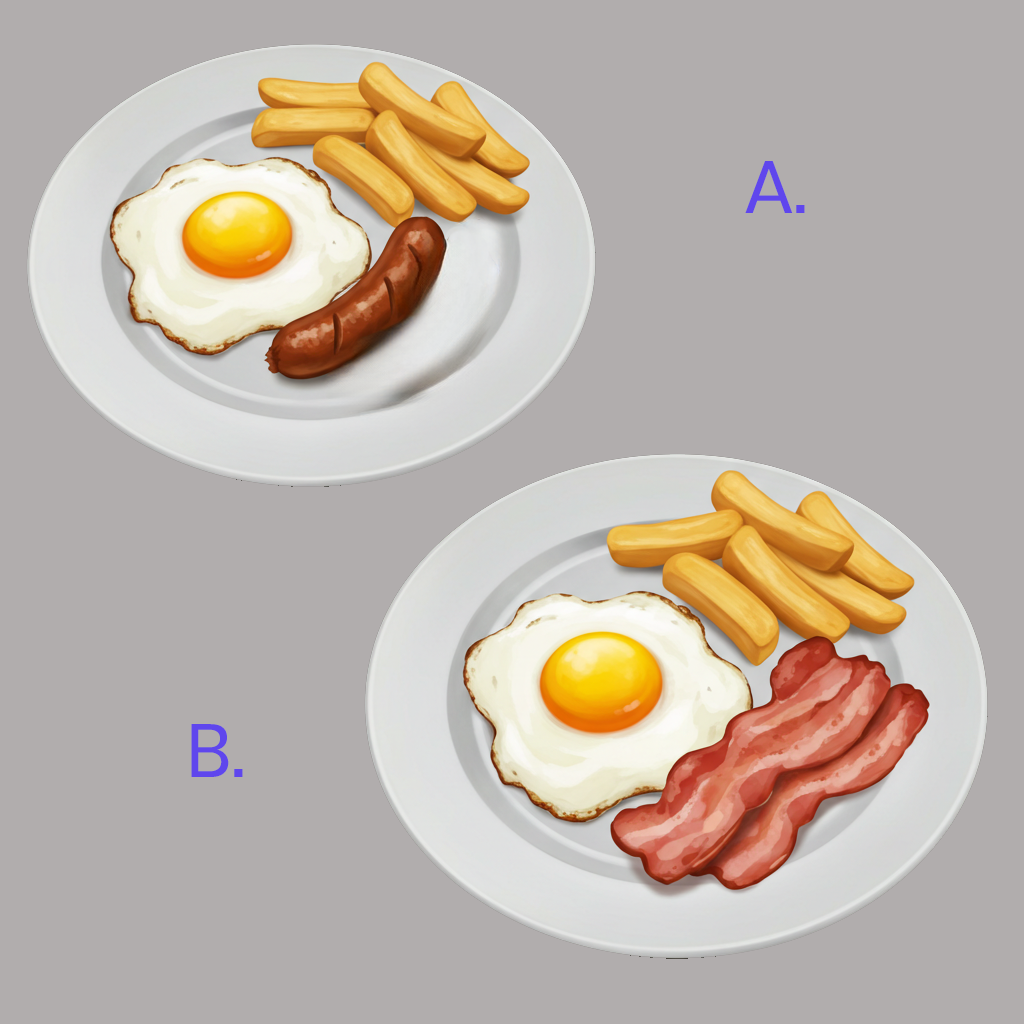
<style>
.page{position:relative;width:1024px;height:1024px;background:#b1adad}
.page>*{position:absolute;margin:0}
.t1{font:75px "Poppins-Regular";color:#5f46ed}
</style>
<div class="page">
<p class="t1" style="left:745px;top:161px;width:60px;height:52px">A.</p>
<p class="t1" style="left:191px;top:724px;width:52px;height:53px">B.</p>
</div>
